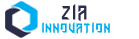
<style>
.page{position:relative;width:139px;height:39px;background:#ffffff}
.page>*{position:absolute;margin:0}
.t1{font:14px/13.6px "AmazObitaemOstrovFine";letter-spacing:0.1em;color:#00aeef;scale:0.78 1}
.t2{font:20.7px/13.6px "AmazObitaemOstrovFine";letter-spacing:0.1em;color:#2a2d49;scale:0.78 1}
</style>
<div class="page">
<p class="t1" style="left:42px;top:4px;width:68px;height:30px;text-align:center"><span class="t2">ZIa <br></span>INNOVATION</p>
</div>
